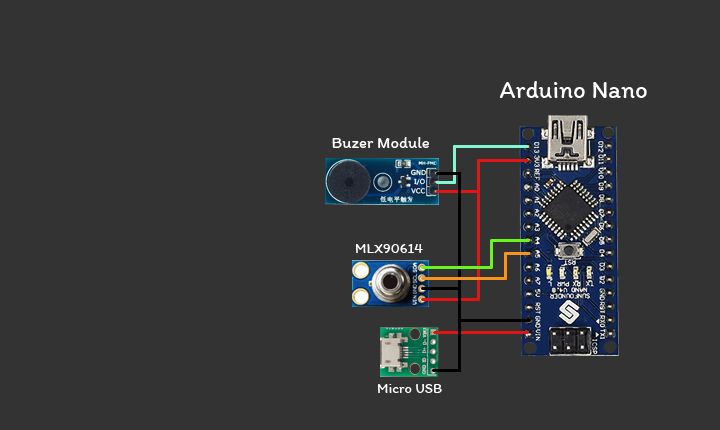
<style>
.page{position:relative;width:720px;height:430px;background:#333333}
.page>*{position:absolute;margin:0}
.t1{font:25px "Itim-Regular";color:#ffffff}
.t2{font:16.7px "Itim-Regular";color:#ffffff}
.t3{font:14.6px "Itim-Regular";color:#ffffff}
</style>
<div class="page">
<p class="t1" style="left:499px;top:81px;width:148px;height:17px">Arduino Nano</p>
<p class="t2" style="left:332px;top:137px;width:97px;height:11px">Buzer Module</p>
<p class="t3" style="left:355px;top:244px;width:68px;height:9px">MLX90614</p>
<p class="t3" style="left:377px;top:384px;width:65px;height:9px">Micro USB</p>
</div>
